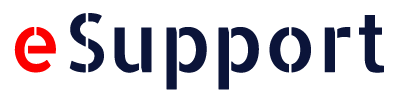
<style>
.page{position:relative;width:400px;height:100px;background:#ffffff}
.page>*{position:absolute;margin:0}
.t1{font:80px "Allerta-Stencil";color:#0b1439;font-weight:bold}
.t2{font:80px "Allerta-Stencil";color:#fb0000;font-weight:bold}
</style>
<div class="page">
<p class="t1" style="left:14px;top:13px;width:370px;height:77px"><span class="t2">e</span>Support</p>
</div>
